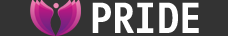
<style>
.page{position:relative;width:228px;height:36px;background:#333333}
.page>*{position:absolute;margin:0}
.t1{font:44.4px "HarmoniaSansMonoW01-Bold";color:#ffffff}
</style>
<div class="page">
<p class="t1" style="left:92px;top:2px;width:107px;height:31px">PRIDE</p>
</div>
